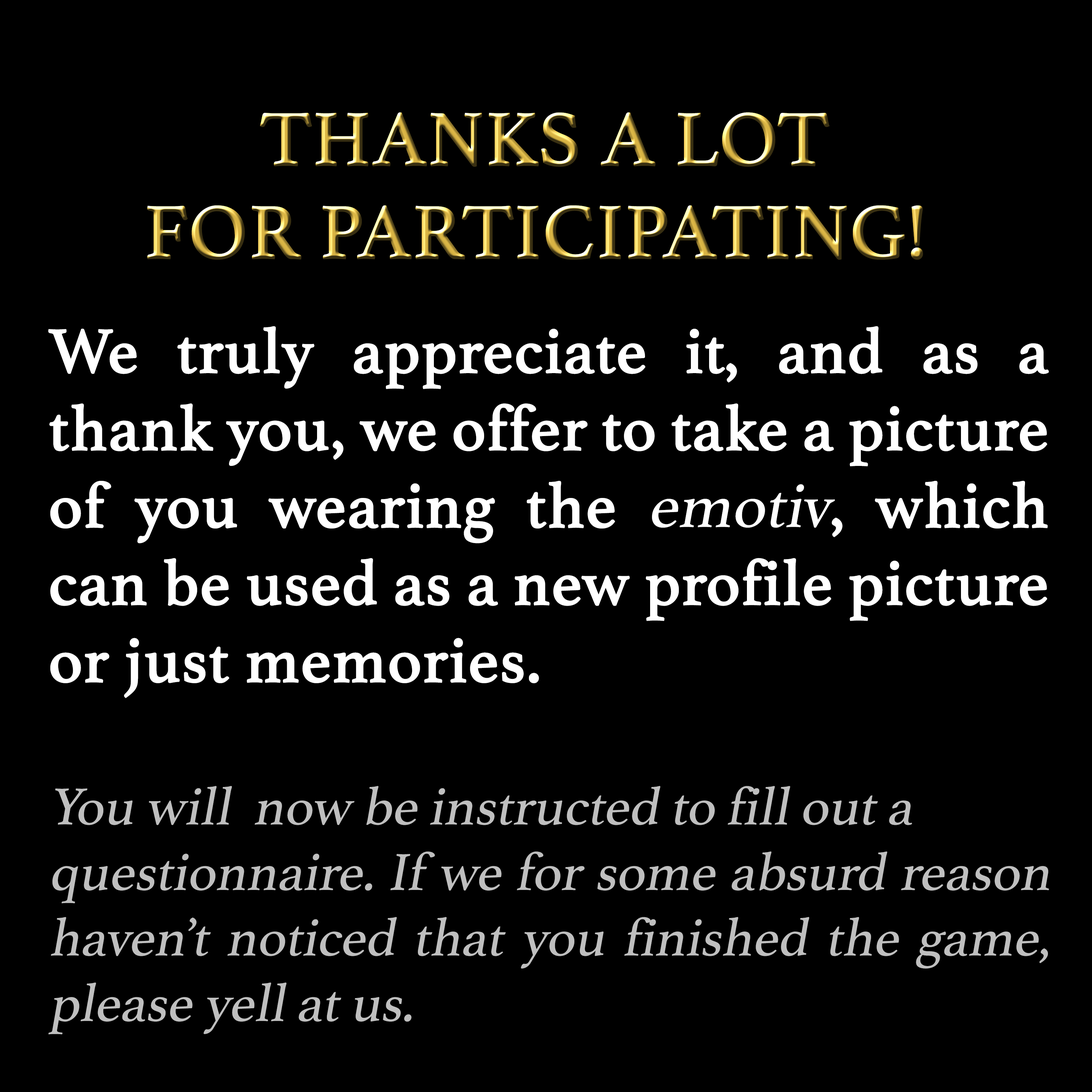
<style>
.page{position:relative;width:1092px;height:1092px;background:#000000}
.page>*{position:absolute;margin:0}
.t1{font:77.5px "Athelas-Regular";font-weight:bold}
.t2{font:54.6px "Athelas-Regular";color:#bfbfbf;font-style:italic}
.t3{font:64.4px "Athelas-Regular";color:#ffffff;font-weight:bold}
.t4{font:64.4px "Athelas-Regular";color:#ffffff;font-style:italic}
</style>
<div class="page">
<p class="t1" style="left:147px;top:112px;width:776px;height:148px;text-align:center">THANKS A LOT<br>FOR PARTICIPATING!</p>
<p class="t2" style="left:48px;top:326px;width:1001px;height:708px;text-align:justify"><span class="t3">We truly appreciate it, and as a thank you, we offer to take a picture of you wearing the </span><span class="t4">emotiv</span><span class="t3">, which can be used as a new profile picture or just memories.<br><br></span>You will  now be instructed to fill out a <br>questionnaire. If we for some absurd reason haven’t noticed that you finished the game, please yell at us.</p>
</div>
